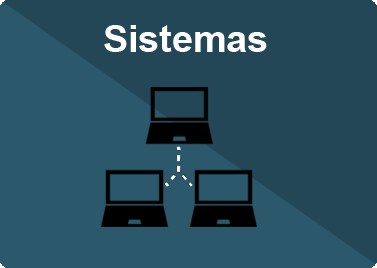
<style>
.page{position:relative;width:377px;height:268px;background:#244758}
.page>*{position:absolute;margin:0}
.t1{font:37.5px "Arial-BoldMT";color:#ffffff}
</style>
<div class="page">
<p class="t1" style="left:104px;top:25px;width:163px;height:27px">Sistemas</p>
</div>
